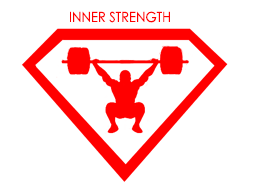
<style>
.page{position:relative;width:253px;height:194px;background:#ffffff}
.page>*{position:absolute;margin:0}
.t1{font:14px "CenturyGothic";color:#ff0000;scale:0.92 1}
</style>
<div class="page">
<p class="t1" style="left:70px;top:11px;width:100px;height:12px">INNER STRENGTH</p>
</div>
